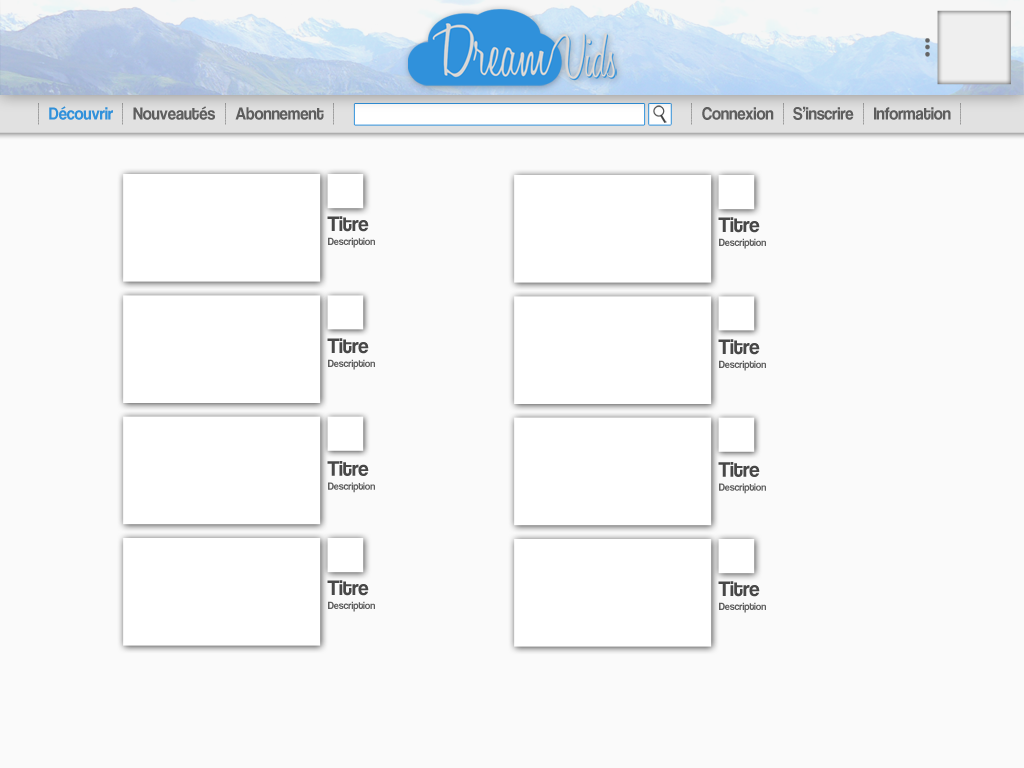
<style>
.page{position:relative;width:1024px;height:768px;background:#fafafa}
.page>*{position:absolute;margin:0}
.t1{font:18.1px "CoolveticaRg-Regular";letter-spacing:-0.005em;color:#3091db;scale:0.91 1}
.t2{font:18.1px "CoolveticaRg-Regular";letter-spacing:-0.005em;color:#5e5e5e;scale:0.91 1}
.t3{font:21.8px "CoolveticaRg-Regular";letter-spacing:-0.005em;color:#474747;scale:0.95 1}
.t4{font:10.7px "CoolveticaRg-Regular";letter-spacing:-0.005em;color:#5e5e5e;scale:0.95 1}
</style>
<div class="page">
<p class="t1" style="left:49px;top:106px;width:64px;height:14px">Découvrir</p>
<p class="t2" style="left:133px;top:106px;width:82px;height:14px">Nouveautés</p>
<p class="t2" style="left:235px;top:107px;width:89px;height:13px">Abonnement</p>
<p class="t2" style="left:702px;top:107px;width:72px;height:13px">Connexion</p>
<p class="t2" style="left:793px;top:106px;width:61px;height:14px">S’inscrire</p>
<p class="t2" style="left:874px;top:107px;width:77px;height:13px">Information</p>
<p class="t3" style="left:327px;top:216px;width:42px;height:16px">Titre</p>
<p class="t3" style="left:718px;top:217px;width:42px;height:16px">Titre</p>
<p class="t4" style="left:328px;top:237px;width:47px;height:11px">Description</p>
<p class="t4" style="left:719px;top:238px;width:47px;height:11px">Description</p>
<p class="t3" style="left:327px;top:338px;width:42px;height:16px">Titre</p>
<p class="t3" style="left:718px;top:339px;width:42px;height:16px">Titre</p>
<p class="t4" style="left:328px;top:359px;width:47px;height:11px">Description</p>
<p class="t4" style="left:719px;top:360px;width:47px;height:11px">Description</p>
<p class="t3" style="left:327px;top:461px;width:42px;height:15px">Titre</p>
<p class="t3" style="left:718px;top:462px;width:42px;height:15px">Titre</p>
<p class="t4" style="left:328px;top:482px;width:47px;height:11px">Description</p>
<p class="t4" style="left:719px;top:483px;width:47px;height:11px">Description</p>
<p class="t3" style="left:327px;top:580px;width:42px;height:16px">Titre</p>
<p class="t3" style="left:718px;top:581px;width:42px;height:16px">Titre</p>
<p class="t4" style="left:328px;top:601px;width:47px;height:11px">Description</p>
<p class="t4" style="left:719px;top:602px;width:47px;height:11px">Description</p>
</div>
